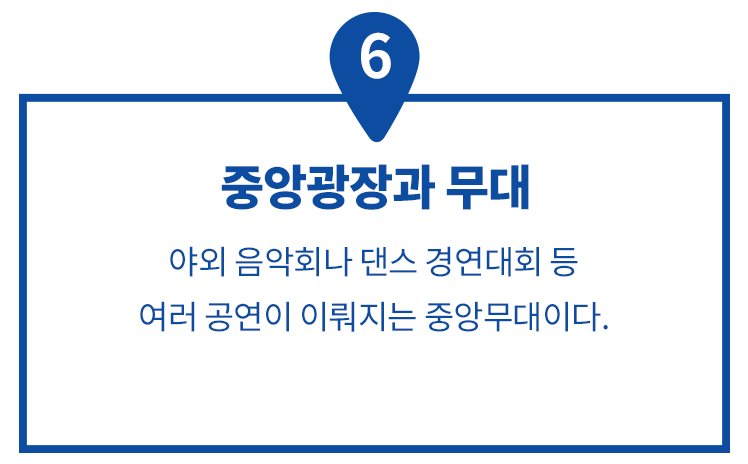
<style>
.page{position:relative;width:748px;height:464px;background:#ffffff}
.page>*{position:absolute;margin:0}
.t1{font:60px "NotoSansCJKkr-Bold";letter-spacing:-0.025em;color:#ffffff}
.t2{font:48px "NotoSansCJKkr-Black";letter-spacing:-0.025em;color:#0c4da1}
.t3{font:33px/55px "NotoSansCJKkr-Regular";letter-spacing:-0.025em;color:#0c4da1}
</style>
<div class="page">
<p class="t1" style="left:361px;top:32px;width:30px;height:47px">6</p>
<p class="t2" style="left:221px;top:164px;width:308px;height:46px">중앙광장과 무대</p>
<p class="t3" style="left:140px;top:246px;width:468px;height:86px;text-align:center">야외 음악회나 댄스 경연대회 등<br>여러 공연이 이뤄지는 중앙무대이다.</p>
</div>
